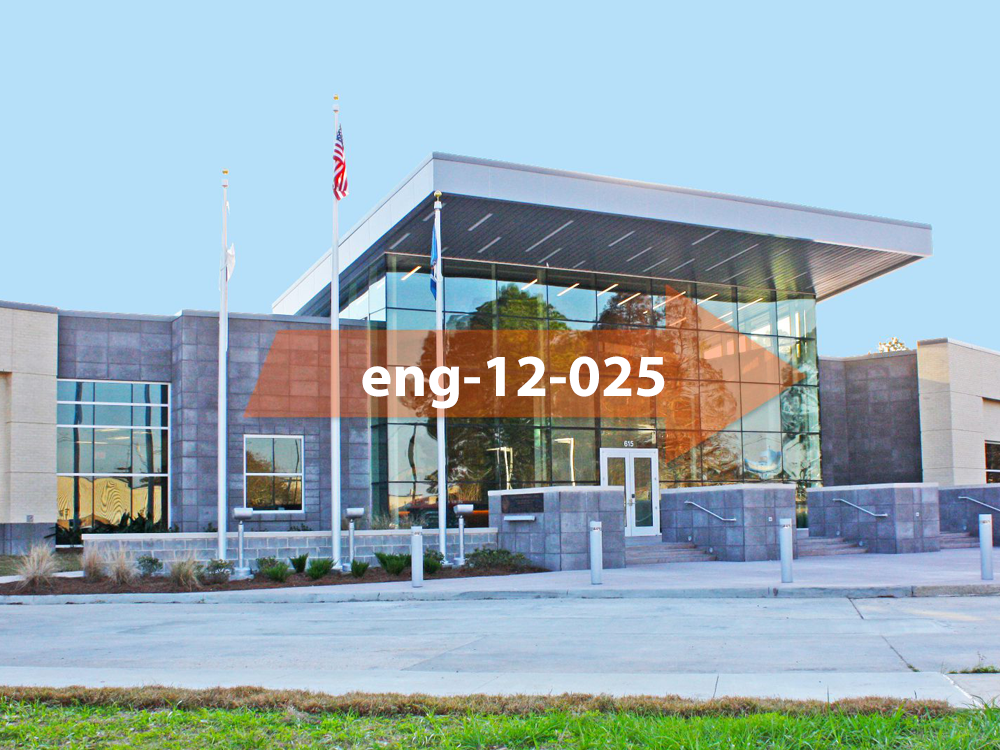
<style>
.page{position:relative;width:1000px;height:750px;background:#b6e0f9}
.page>*{position:absolute;margin:0}
.t1{font:60px "MyriadPro-Bold";color:#ffffff}
</style>
<div class="page">
<p class="t1" style="left:362px;top:356px;width:303px;height:53px">eng-12-025</p>
</div>
